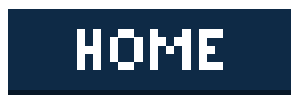
<style>
.page{position:relative;width:300px;height:100px;background:#0e2a46}
.page>*{position:absolute;margin:0}
.t1{font:65px "Pixelated";color:#ffffff}
</style>
<div class="page">
<p class="t1" style="left:77px;top:29px;width:146px;height:41px">HOME</p>
</div>
